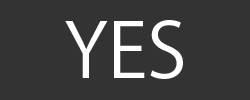
<style>
.page{position:relative;width:250px;height:100px;background:#333333}
.page>*{position:absolute;margin:0}
.t1{font:75px "KozGoPr6N-Regular";color:#ffffff}
</style>
<div class="page">
<p class="t1" style="left:65px;top:20px;width:118px;height:59px">YES</p>
</div>
